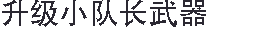
<style>
.page{position:relative;width:256px;height:32px;background:#ffffff}
.page>*{position:absolute;margin:0}
.t1{font:30px "AdobeHeitiStd-Regular";color:#2a2731}
</style>
<div class="page">
<p class="t1" style="left:2px;top:0px;width:204px;height:27px">升级小队长武器</p>
</div>
